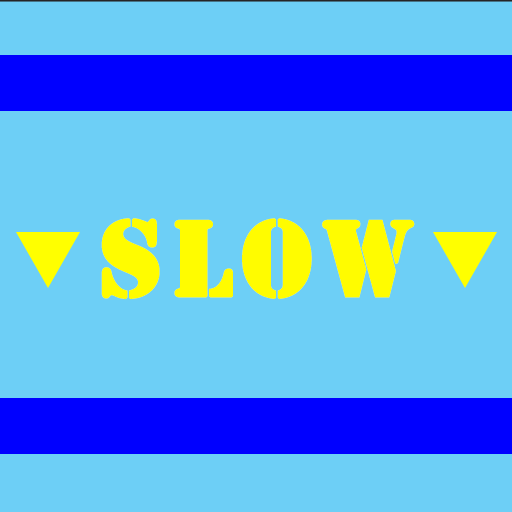
<style>
.page{position:relative;width:512px;height:512px;background:#6dcff6}
.page>*{position:absolute;margin:0}
.t1{font:100px "StencilStd";letter-spacing:0.07em;color:#fffc00;font-weight:bold}
</style>
<div class="page">
<p class="t1" style="left:101px;top:218px;width:314px;height:81px">SLOW</p>
</div>
